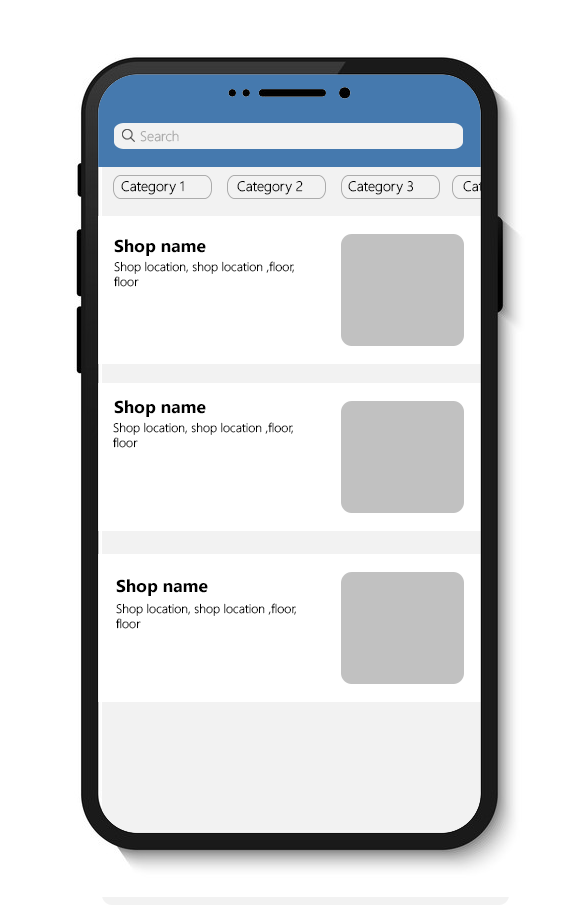
<style>
.page{position:relative;width:562px;height:924px;background:#ffffff}
.page>*{position:absolute;margin:0}
.t1{font:13.6px "SegoeUI-Light";color:#ababab;scale:1.03 1}
.t2{font:13.6px "SegoeUI-Light";color:#000000;scale:1.03 1}
.t3{font:17.2px "SegoeUI-Bold";color:#000000}
.t4{font:12.3px "SegoeUI-Light";color:#000000}
</style>
<div class="page">
<p class="t1" style="left:140px;top:130px;width:39px;height:12px">Search</p>
<p class="t2" style="left:121px;top:181px;width:63px;height:14px">Category 1</p>
<p class="t2" style="left:237px;top:181px;width:66px;height:14px">Category 2</p>
<p class="t2" style="left:348px;top:181px;width:65px;height:14px">Category 3</p>
<p class="t3" style="left:114px;top:239px;width:92px;height:17px">Shop name</p>
<p class="t4" style="left:114px;top:261px;width:180px;height:26px">Shop location, shop location ,floor, <br>floor</p>
<p class="t3" style="left:114px;top:400px;width:92px;height:17px">Shop name</p>
<p class="t4" style="left:113px;top:422px;width:180px;height:26px">Shop location, shop location ,floor, <br>floor</p>
<p class="t3" style="left:116px;top:579px;width:92px;height:17px">Shop name</p>
<p class="t4" style="left:116px;top:603px;width:180px;height:26px">Shop location, shop location ,floor, <br>floor</p>
</div>
